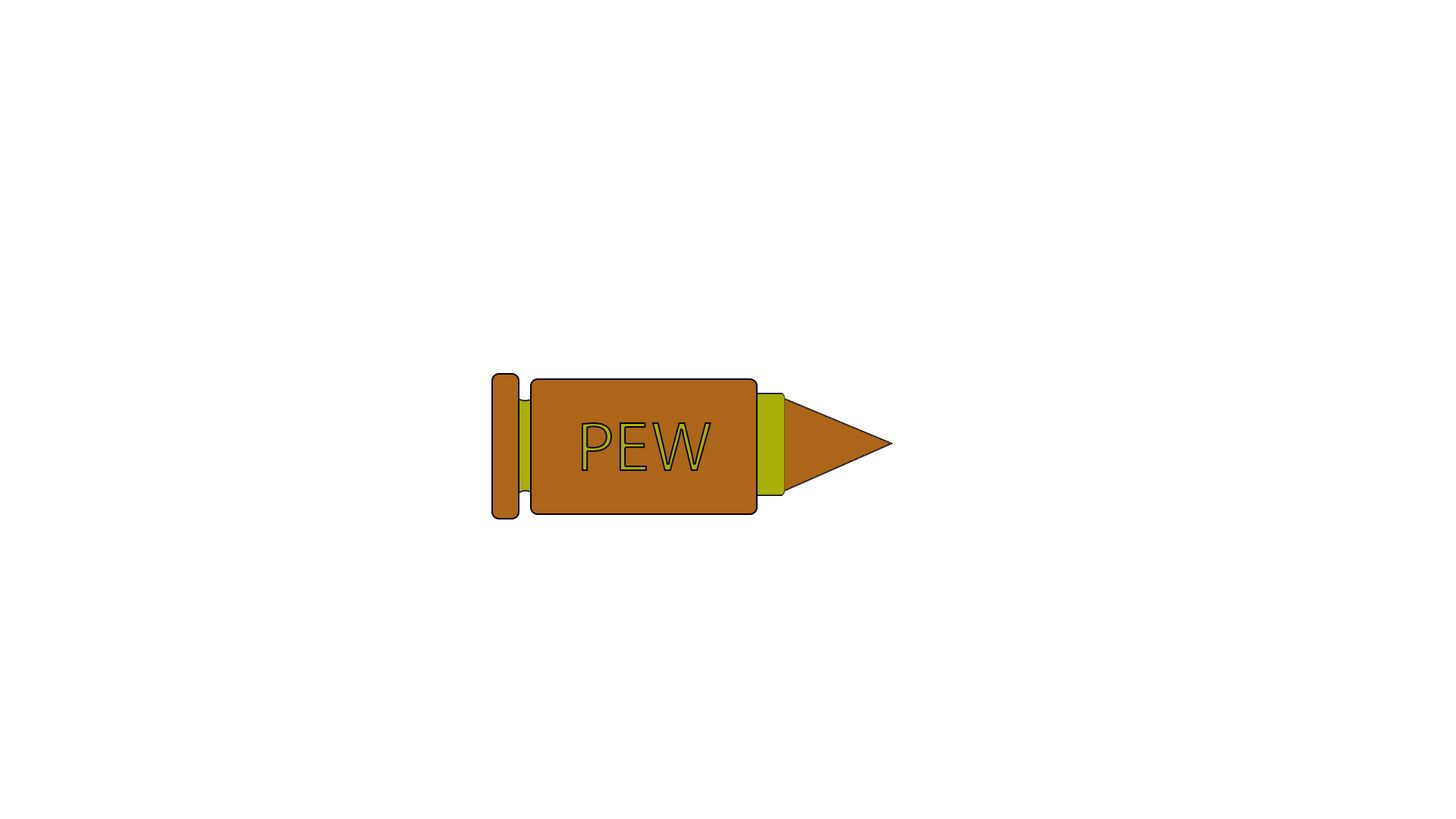
<style>
.page{position:relative;width:1456px;height:819px;background:#ffffff}
.page>*{position:absolute;margin:0}
.t1{font:72.2px "MyriadPro-Regular"}
</style>
<div class="page">
<p class="t1" style="left:582px;top:422px;width:129px;height:49px">PEW</p>
</div>
